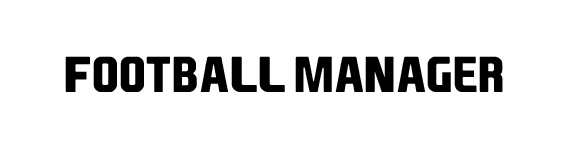
<style>
.page{position:relative;width:567px;height:142px;background:#ffffff}
.page>*{position:absolute;margin:0}
.t1{font:48px "EASPORTS";color:#000000}
</style>
<div class="page">
<p class="t1" style="left:65px;top:56px;width:438px;height:36px">Football Manager</p>
</div>
